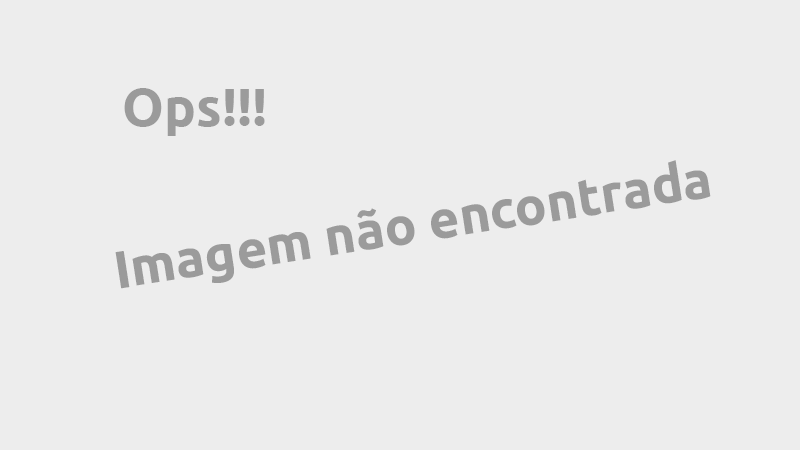
<style>
.page{position:relative;width:800px;height:450px;background:#ededed}
.page>*{position:absolute;margin:0}
.t1{font:53px "Ubuntu-Bold";color:#9b9b9b}
</style>
<div class="page">
<p class="t1" style="left:124px;top:88px;width:141px;height:48px">Ops!!!</p>
<p class="t1" style="left:115px;top:160px;width:596px;height:129px;rotate:-9deg">Imagem não encontrada</p>
</div>
